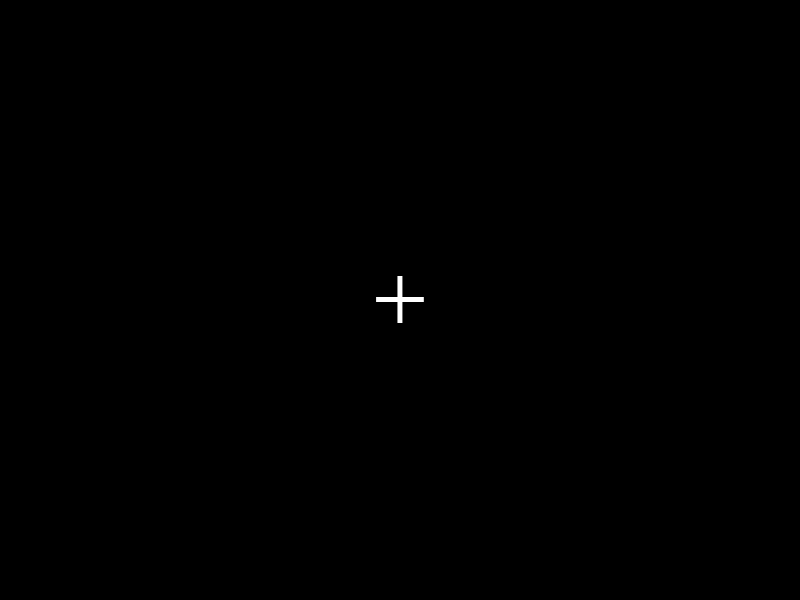
<style>
.page{position:relative;width:800px;height:600px;background:#000000}
.page>*{position:absolute;margin:0}
.t1{font:90px "BodoniMT";color:#ffffff}
</style>
<div class="page">
<p class="t1" style="left:376px;top:276px;width:48px;height:47px">+</p>
</div>
